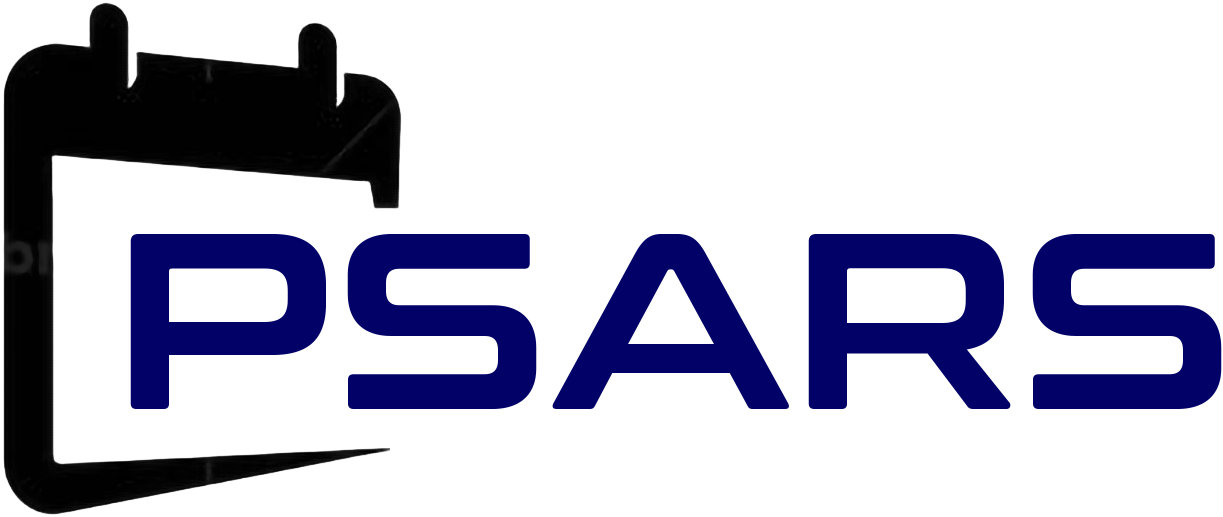
<style>
.page{position:relative;width:1223px;height:517px;background:#ffffff}
.page>*{position:absolute;margin:0}
.t1{font:250px "ConthraxSb-Regular";color:#010168}
</style>
<div class="page">
<p class="t1" style="left:130px;top:234px;width:1092px;height:175px">PSARS</p>
</div>
